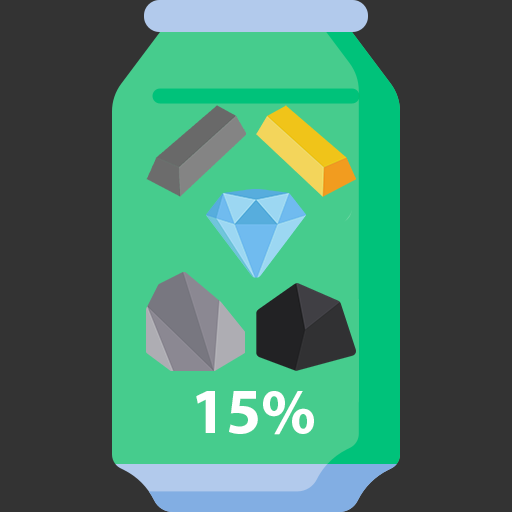
<style>
.page{position:relative;width:512px;height:512px;background:#333333}
.page>*{position:absolute;margin:0}
.t1{font:62.8px "MyriadPro-Bold";color:#ffffff}
</style>
<div class="page">
<p class="t1" style="left:196px;top:391px;width:118px;height:44px">15%</p>
</div>
